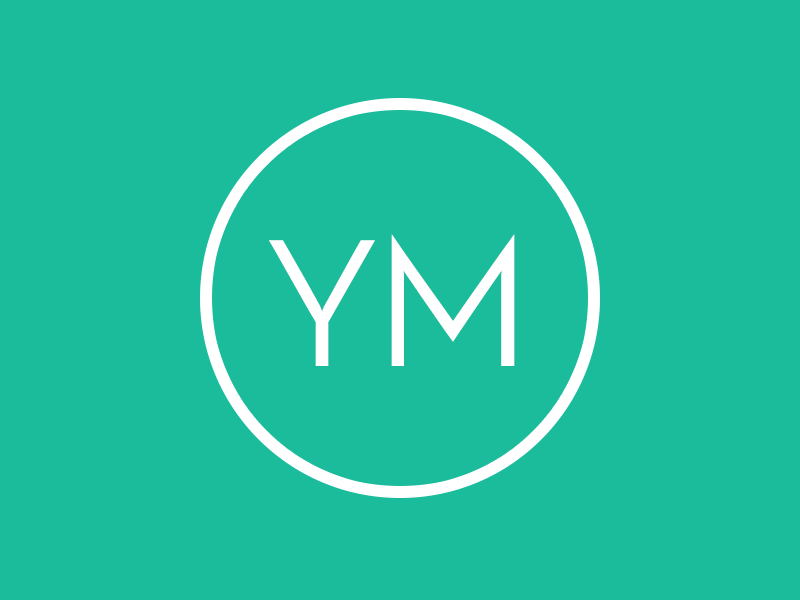
<style>
.page{position:relative;width:800px;height:600px;background:#1abc9c}
.page>*{position:absolute;margin:0}
.t1{font:176px "JosefinSans";letter-spacing:-0.02em;color:#ffffff}
</style>
<div class="page">
<p class="t1" style="left:269px;top:234px;width:246px;height:132px">YM</p>
</div>
